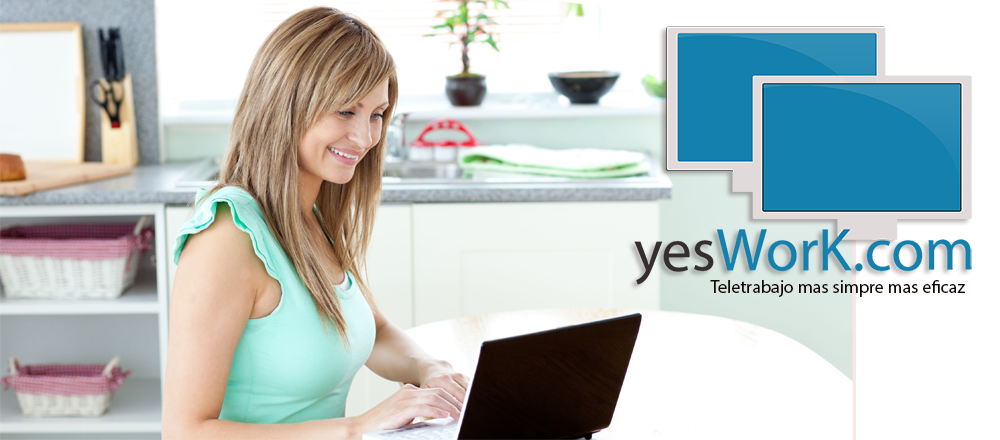
<style>
.page{position:relative;width:1000px;height:440px;background:#ffffff}
.page>*{position:absolute;margin:0}
.t1{font:18px "MyriadPro-Regular";color:#150802}
</style>
<div class="page">
<p class="t1" style="left:710px;top:280px;width:255px;height:17px">Teletrabajo mas simpre mas eficaz</p>
</div>
